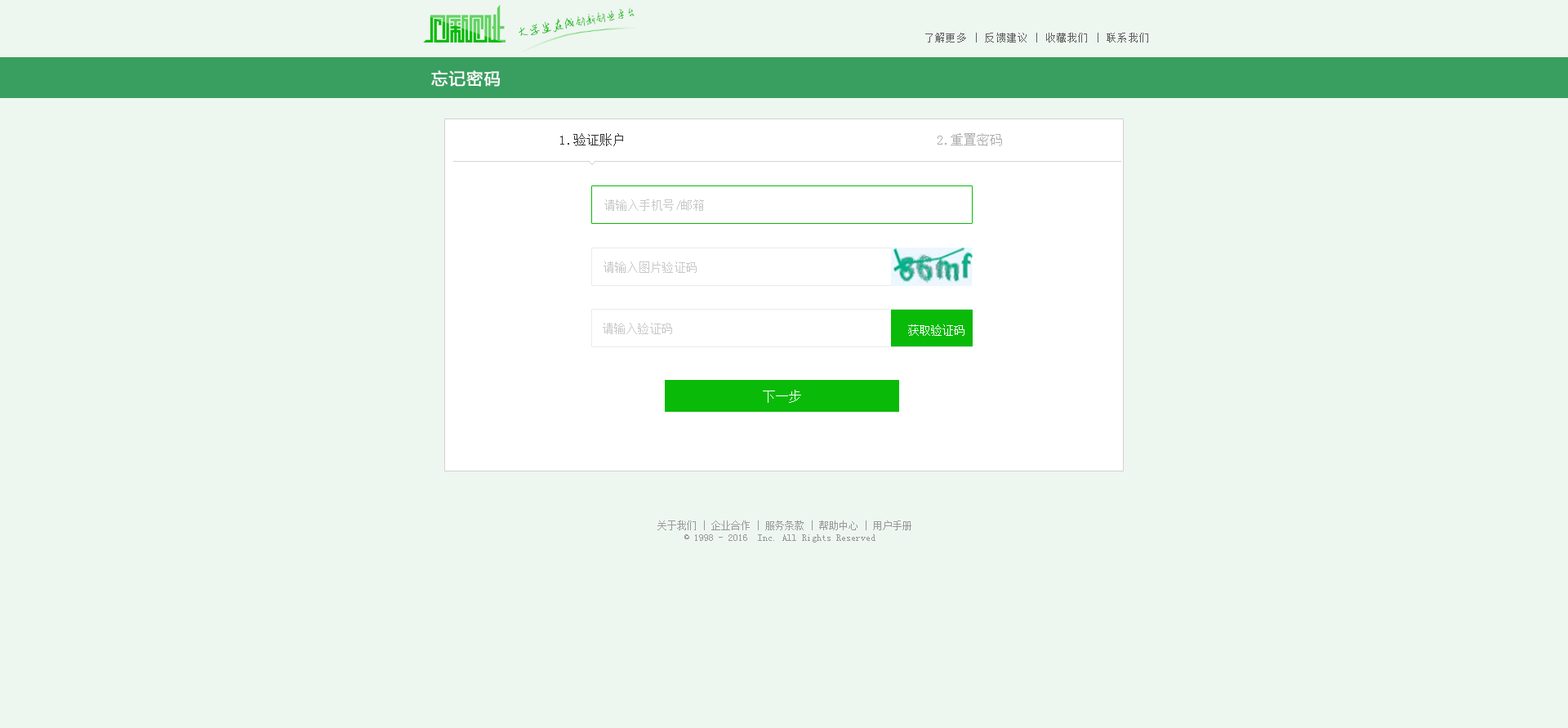
<style>
.page{position:relative;width:1568px;height:728px;background:#eef6f0}
.page>*{position:absolute;margin:0}
.t1{font:11.2px "AnJingCheng-Xing-2.0";letter-spacing:-0.01em;color:#09ba08}
.t2{font:12.6px "AnJingCheng-Xing-2.0";letter-spacing:-0.01em;color:#09ba08}
.t3{font:9.8px "SimSun";letter-spacing:0.1em;color:#606060}
.t4{font:16.3px "MicrosoftYaHei";letter-spacing:0.025em;color:#ffffff;font-weight:bold}
.t5{font:13.1px "SimSun";color:#333333}
.t6{font:13.1px "SimSun";color:#adadad}
.t7{font:11.4px "SimSun";color:#c9c8c8}
.t8{font:11.4px "SimSun";color:#ffffff}
.t9{font:13.1px "SimSun";color:#ffffff}
.t10{font:9.8px "SimSun";color:#999999}
</style>
<div class="page">
<p class="t1" style="left:519px;top:7px;width:116px;height:29px;rotate:-10deg"><span class="t2">大学生在线</span>创新创业平台</p>
<p class="t3" style="left:925px;top:33px;width:223px;height:9px">了解更多 | 反馈建议 | 收藏我们 | 联系我们</p>
<p class="t4" style="left:431px;top:70px;width:69px;height:17px">忘记密码</p>
<p class="t5" style="left:560px;top:133px;width:63px;height:13px">1.验证账户</p>
<p class="t6" style="left:938px;top:133px;width:64px;height:13px">2.重置密码</p>
<p class="t7" style="left:604px;top:199px;width:100px;height:12px">请输入手机号/邮箱</p>
<p class="t7" style="left:604px;top:261px;width:93px;height:12px">请输入图片验证码</p>
<p class="t7" style="left:603px;top:323px;width:69px;height:11px">请输入验证码</p>
<p class="t8" style="left:908px;top:324px;width:56px;height:12px">获取验证码</p>
<p class="t9" style="left:763px;top:390px;width:38px;height:13px">下一步</p>
<p class="t10" style="left:657px;top:520px;width:254px;height:22px;text-align:center">关于我们 | 企业合作 | 服务条款 | 帮助中心 | 用户手册<br>© 1998 - 2016  Inc. All Rights Reserved</p>
</div>
